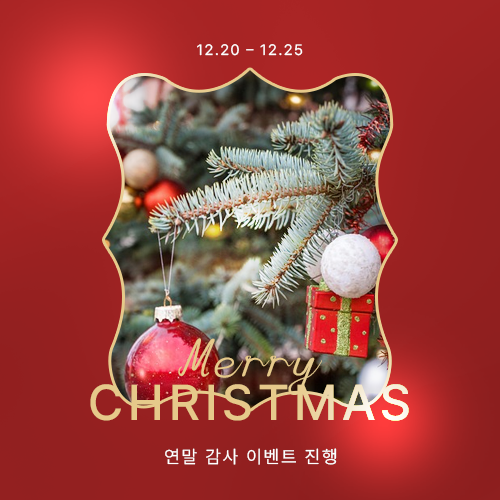
<style>
.page{position:relative;width:500px;height:500px}
.page>*{position:absolute;margin:0}
.t1{font:15px "Pretendard-Regular";letter-spacing:0.1em;color:#ffffff;text-transform:uppercase}
.t2{font:50px "Continuous";letter-spacing:0.1em;color:#e6c98a}
.t3{font:50px "Pretendard-Medium";letter-spacing:0.1em;color:#e6c98a}
.t4{font:18px "Pretendard-Regular";letter-spacing:0.1em;color:#ffffff;text-transform:uppercase}
</style>
<div class="page">
<p class="t1" style="left:197px;top:44px;width:106px;height:12px">12.20 – 12.25</p>
<p class="t2" style="left:178px;top:338px;width:144px;height:57px">Merry</p>
<p class="t3" style="left:90px;top:384px;width:319px;height:37px">CHRISTMAS</p>
<p class="t4" style="left:165px;top:448px;width:172px;height:17px">연말 감사 이벤트 진행</p>
</div>
